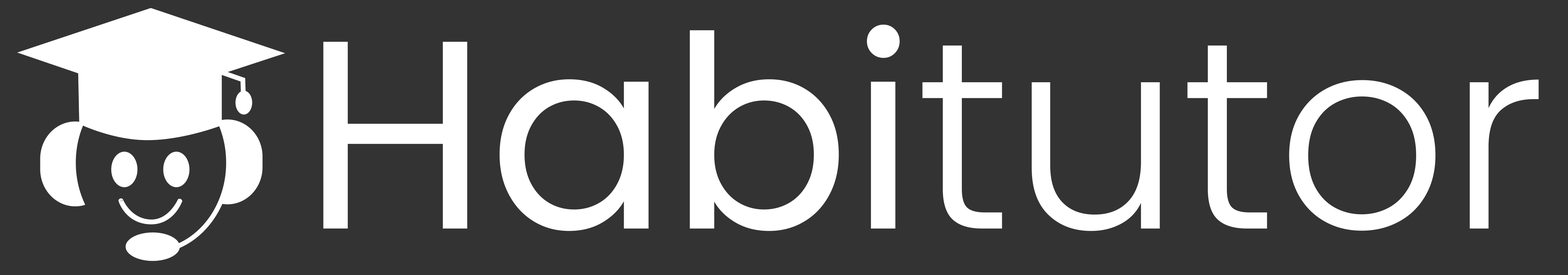
<style>
.page{position:relative;width:1568px;height:275px;background:#333333}
.page>*{position:absolute;margin:0}
.t1{font:268px "Poppins-Light";color:#ffffff}
.t2{font:268px "Poppins-Regular";color:#ffffff}
</style>
<div class="page">
<p class="t1" style="left:323px;top:24px;width:1216px;height:207px"><span class="t2">Habi</span>tutor</p>
</div>
